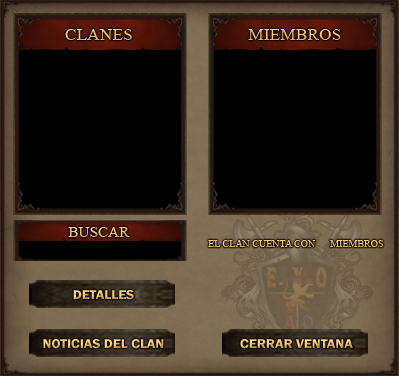
<style>
.page{position:relative;width:399px;height:376px;background:#000000}
.page>*{position:absolute;margin:0}
.t1{font:16px "TimesNewRomanPSMT";color:#f5c667;scale:1.09 1}
.t2{font:16px "TimesNewRomanPSMT";scale:1.09 1}
.t3{font:14px "TimesNewRomanPSMT";scale:1.09 1}
.t4{font:10px "TimesNewRomanPSMT"}
.t5{font:13px "FranklinGothic-Demi";scale:1.07 1}
</style>
<div class="page">
<p class="t1" style="left:65px;top:29px;width:67px;height:11px">CLANES</p>
<p class="t2" style="left:248px;top:29px;width:93px;height:11px">MIEMBROS</p>
<p class="t3" style="left:68px;top:227px;width:62px;height:10px">BUSCAR</p>
<p class="t4" style="left:208px;top:240px;width:176px;height:7px">EL CLAN CUENTA CON      MIEMBROS</p>
<p class="t5" style="left:73px;top:290px;width:61px;height:10px">DETALLES</p>
<p class="t5" style="left:43px;top:339px;width:121px;height:10px">NOTICIAS DEL CLAN</p>
<p class="t5" style="left:240px;top:339px;width:113px;height:10px">CERRAR VENTANA</p>
</div>
